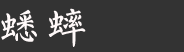
<style>
.page{position:relative;width:184px;height:52px;background:#333333}
.page>*{position:absolute;margin:0}
.t1{font:41.8px "LiuKai";letter-spacing:0.15em;color:#fff9f9}
</style>
<div class="page">
<p class="t1" style="left:1px;top:8px;width:85px;height:39px;rotate:-1deg">蟋蟀</p>
</div>
